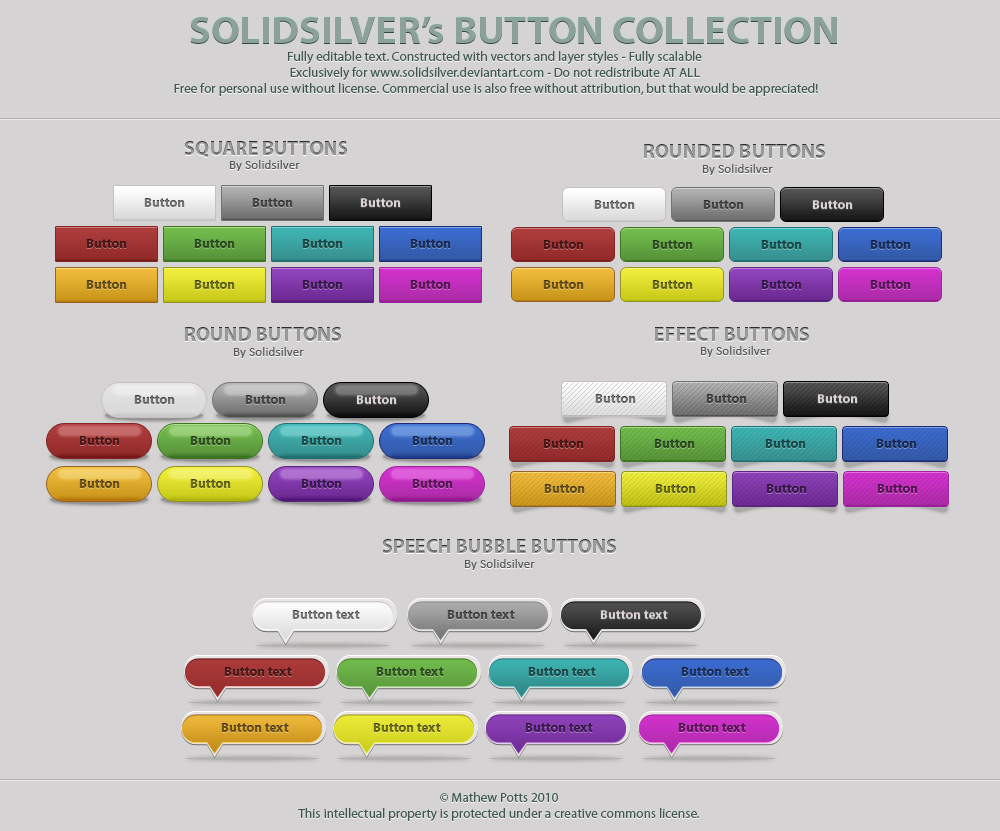
<style>
.page{position:relative;width:1000px;height:831px;background:#d5d3d3}
.page>*{position:absolute;margin:0}
.t1{font:40px "MyriadPro-Bold";color:#8ca199}
.t2{font:13.3px "MyriadPro-Regular";color:#40584f}
.t3{font:20px "MyriadPro-Bold";color:#989898}
.t4{font:13.3px "Calibri";color:#575757}
.t5{font:13.3px "MyriadPro-Bold";color:#757575}
.t6{font:13.3px "MyriadPro-Bold";color:#464646}
.t7{font:13.3px "MyriadPro-Bold";color:#dad4d4}
.t8{font:13.3px "MyriadPro-Bold";color:#4f1919}
.t9{font:13.3px "MyriadPro-Bold";color:#315321}
.t10{font:13.3px "MyriadPro-Bold";color:#1d504f}
.t11{font:13.3px "MyriadPro-Bold";color:#1b315d}
.t12{font:13.3px "MyriadPro-Bold";color:#315221}
.t13{font:13.3px "MyriadPro-Bold";color:#1b315c}
.t14{font:13.3px "MyriadPro-Bold";color:#6d5314}
.t15{font:13.3px "MyriadPro-Bold";color:#6d6d14}
.t16{font:13.3px "MyriadPro-Bold";color:#3e1a52}
.t17{font:13.3px "MyriadPro-Bold";color:#5e175c}
.t18{font:13.3px "MyriadPro-Bold";color:#6c6c14}
.t19{font:13.3px "MyriadPro-Bold";color:#5e175b}
.t20{font:13.3px "MyriadPro-Bold";color:#6f6f6f}
.t21{font:13.3px "MyriadPro-Bold";color:#454545}
.t22{font:13.3px "MyriadPro-Bold";color:#1b305c}
.t23{font:13.3px "MyriadPro-Bold";color:#6d5315}
.t24{font:13.3px "MyriadPro-Bold";color:#6d6d15}
.t25{font:13.3px "MyriadPro-Bold";color:#6a6a13}
.t26{font:13.3px "MyriadPro-Bold";color:#3d1a52}
.t27{font:13.3px "MyriadPro-Bold";color:#5f175c}
.t28{font:13.3px "MyriadPro-Bold";color:#787878}
.t29{font:13.3px "MyriadPro-Bold";color:#4c4c4c}
.t30{font:13.3px "MyriadPro-Bold";color:#511a1a}
.t31{font:13.3px "MyriadPro-Bold";color:#335623}
.t32{font:13.3px "MyriadPro-Bold";color:#1c5150}
.t33{font:13.3px "MyriadPro-Bold";color:#1c3260}
.t34{font:13.3px "MyriadPro-Bold";color:#6f5416}
.t35{font:13.3px "MyriadPro-Bold";color:#706f17}
.t36{font:13.3px "MyriadPro-Bold";color:#411d56}
.t37{font:13.3px "MyriadPro-Bold";color:#62175f}
</style>
<div class="page">
<p class="t1" style="left:190px;top:15px;width:647px;height:28px">SOLIDSILVER’s BUTTON COLLECTION</p>
<p class="t2" style="left:174px;top:51px;width:644px;height:45px;text-align:center">Fully editable text. Constructed with vectors and layer styles - Fully scalable <br>Exclusively for www.solidsilver.deviantart.com - Do not redistribute AT ALL <br>Free for personal use without license. Commercial use is also free without attribution, but that would be appreciated!</p>
<p class="t3" style="left:184px;top:141px;width:163px;height:16px">SQUARE BUTTONS</p>
<p class="t3" style="left:644px;top:144px;width:181px;height:14px">ROUNDED BUTTONS</p>
<p class="t4" style="left:230px;top:160px;width:70px;height:11px">By Solidsilver</p>
<p class="t4" style="left:703px;top:164px;width:70px;height:11px">By Solidsilver</p>
<p class="t5" style="left:144px;top:198px;width:41px;height:9px">Button</p>
<p class="t6" style="left:252px;top:198px;width:41px;height:9px">Button</p>
<p class="t7" style="left:360px;top:198px;width:41px;height:9px">Button</p>
<p class="t5" style="left:594px;top:200px;width:41px;height:9px">Button</p>
<p class="t6" style="left:703px;top:200px;width:41px;height:9px">Button</p>
<p class="t7" style="left:812px;top:200px;width:41px;height:9px">Button</p>
<p class="t8" style="left:86px;top:239px;width:41px;height:9px">Button</p>
<p class="t9" style="left:194px;top:239px;width:41px;height:9px">Button</p>
<p class="t10" style="left:302px;top:239px;width:41px;height:9px">Button</p>
<p class="t11" style="left:410px;top:239px;width:41px;height:9px">Button</p>
<p class="t8" style="left:543px;top:240px;width:41px;height:9px">Button</p>
<p class="t12" style="left:652px;top:240px;width:41px;height:9px">Button</p>
<p class="t10" style="left:761px;top:240px;width:41px;height:9px">Button</p>
<p class="t13" style="left:870px;top:240px;width:41px;height:9px">Button</p>
<p class="t14" style="left:86px;top:280px;width:41px;height:9px">Button</p>
<p class="t15" style="left:194px;top:280px;width:41px;height:9px">Button</p>
<p class="t16" style="left:302px;top:280px;width:41px;height:9px">Button</p>
<p class="t17" style="left:410px;top:280px;width:41px;height:9px">Button</p>
<p class="t14" style="left:543px;top:280px;width:41px;height:9px">Button</p>
<p class="t18" style="left:652px;top:280px;width:41px;height:9px">Button</p>
<p class="t16" style="left:761px;top:280px;width:41px;height:9px">Button</p>
<p class="t19" style="left:870px;top:280px;width:41px;height:9px">Button</p>
<p class="t3" style="left:185px;top:327px;width:156px;height:14px">ROUND BUTTONS</p>
<p class="t3" style="left:655px;top:327px;width:154px;height:14px">EFFECT BUTTONS</p>
<p class="t4" style="left:234px;top:347px;width:70px;height:11px">By Solidsilver</p>
<p class="t4" style="left:701px;top:346px;width:70px;height:11px">By Solidsilver</p>
<p class="t20" style="left:134px;top:395px;width:41px;height:9px">Button</p>
<p class="t6" style="left:245px;top:395px;width:41px;height:9px">Button</p>
<p class="t7" style="left:356px;top:395px;width:41px;height:9px">Button</p>
<p class="t5" style="left:595px;top:394px;width:41px;height:9px">Button</p>
<p class="t21" style="left:706px;top:394px;width:41px;height:9px">Button</p>
<p class="t7" style="left:817px;top:394px;width:41px;height:9px">Button</p>
<p class="t8" style="left:79px;top:436px;width:41px;height:9px">Button</p>
<p class="t9" style="left:190px;top:436px;width:41px;height:9px">Button</p>
<p class="t10" style="left:301px;top:436px;width:41px;height:9px">Button</p>
<p class="t11" style="left:412px;top:436px;width:41px;height:9px">Button</p>
<p class="t8" style="left:543px;top:439px;width:41px;height:9px">Button</p>
<p class="t12" style="left:654px;top:439px;width:41px;height:9px">Button</p>
<p class="t10" style="left:765px;top:439px;width:41px;height:9px">Button</p>
<p class="t22" style="left:876px;top:439px;width:41px;height:9px">Button</p>
<p class="t23" style="left:79px;top:479px;width:41px;height:9px">Button</p>
<p class="t24" style="left:190px;top:479px;width:41px;height:9px">Button</p>
<p class="t16" style="left:301px;top:479px;width:41px;height:9px">Button</p>
<p class="t17" style="left:412px;top:479px;width:41px;height:9px">Button</p>
<p class="t23" style="left:544px;top:484px;width:41px;height:9px">Button</p>
<p class="t25" style="left:655px;top:484px;width:41px;height:9px">Button</p>
<p class="t26" style="left:766px;top:484px;width:41px;height:9px">Button</p>
<p class="t27" style="left:877px;top:484px;width:41px;height:9px">Button</p>
<p class="t3" style="left:382px;top:539px;width:234px;height:14px">SPEECH BUBBLE BUTTONS</p>
<p class="t4" style="left:465px;top:559px;width:70px;height:11px">By Solidsilver</p>
<p class="t28" style="left:292px;top:610px;width:68px;height:9px">Button text</p>
<p class="t29" style="left:447px;top:610px;width:68px;height:9px">Button text</p>
<p class="t7" style="left:600px;top:610px;width:68px;height:9px">Button text</p>
<p class="t30" style="left:224px;top:667px;width:68px;height:9px">Button text</p>
<p class="t31" style="left:376px;top:667px;width:68px;height:9px">Button text</p>
<p class="t32" style="left:528px;top:667px;width:68px;height:9px">Button text</p>
<p class="t33" style="left:681px;top:667px;width:68px;height:9px">Button text</p>
<p class="t34" style="left:221px;top:723px;width:68px;height:9px">Button text</p>
<p class="t35" style="left:373px;top:723px;width:68px;height:9px">Button text</p>
<p class="t36" style="left:525px;top:723px;width:68px;height:9px">Button text</p>
<p class="t37" style="left:678px;top:723px;width:68px;height:9px">Button text</p>
<p class="t2" style="left:298px;top:792px;width:401px;height:29px;text-align:center">© Mathew Potts 2010<br>This intellectual property is protected under a creative commons license.</p>
</div>
